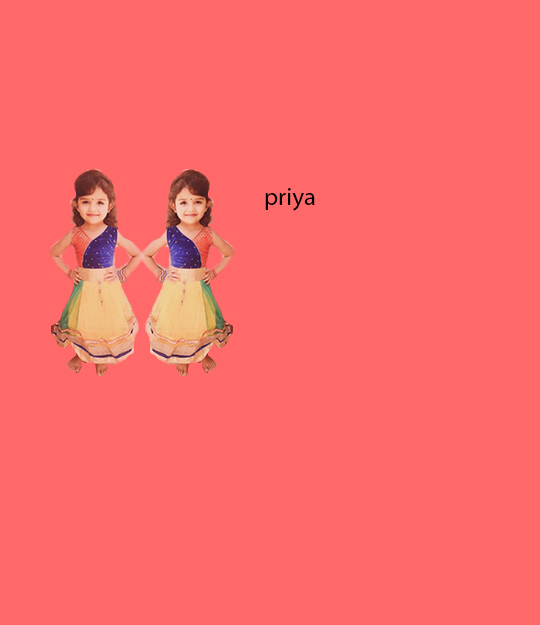
<style>
.page{position:relative;width:540px;height:625px;background:#ff6969}
.page>*{position:absolute;margin:0}
.t1{font:25px "MyriadPro-Regular";color:#000000}
</style>
<div class="page">
<p class="t1" style="left:265px;top:188px;width:50px;height:23px">priya</p>
</div>
